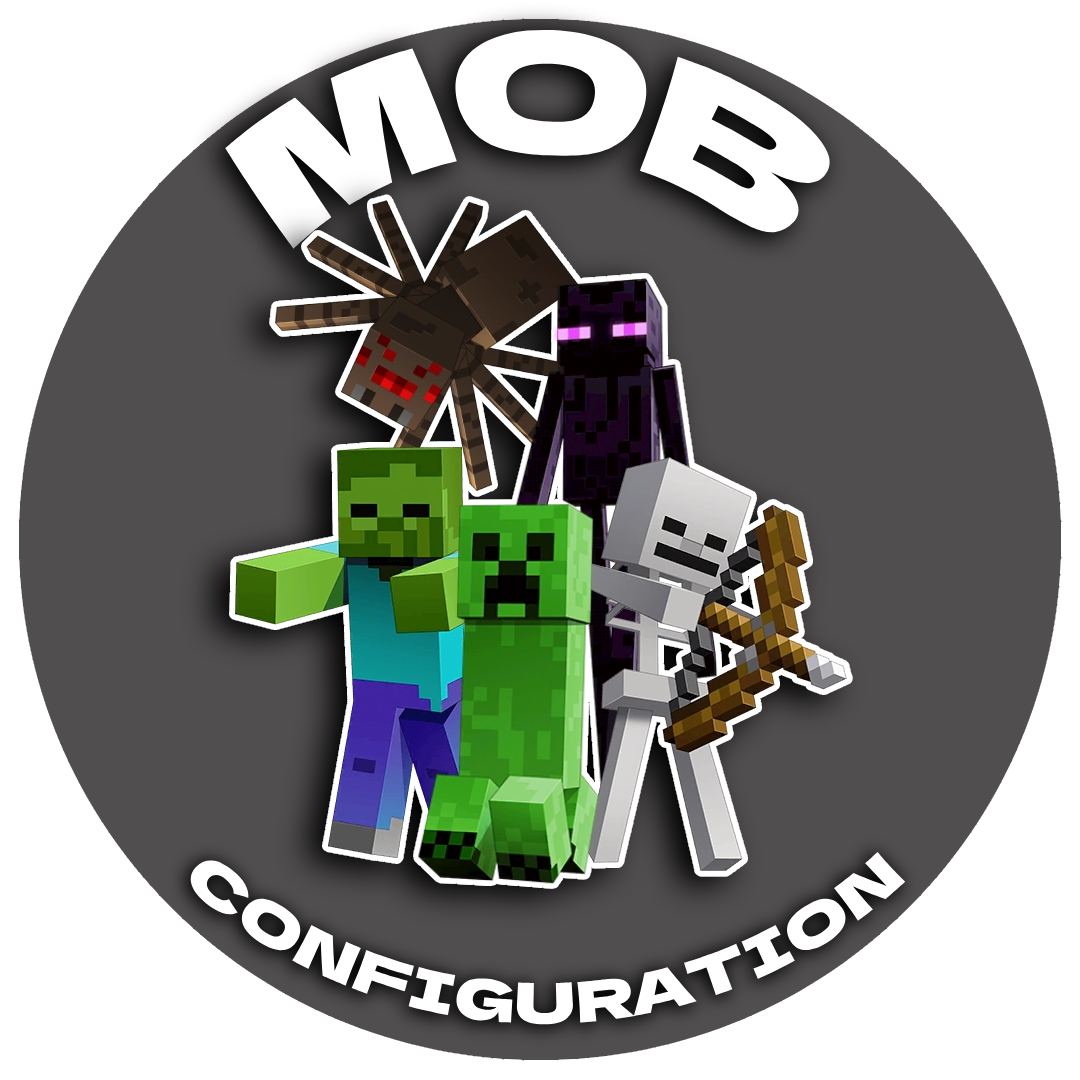
<style>
.page{position:relative;width:1080px;height:1080px;background:#ffffff}
.page>*{position:absolute;margin:0}
.t1{font:165.6px "DelaGothicOne-Regular";color:#ffffff}
.t2{font:55.9px "DelaGothicOne-Regular";color:#ffffff}
</style>
<div class="page">
<p class="t1" style="left:225px;top:29px;width:606px;height:220px">MOB</p>
<p class="t2" style="left:190px;top:852px;width:715px;height:173px">CONFIGURATION</p>
</div>
